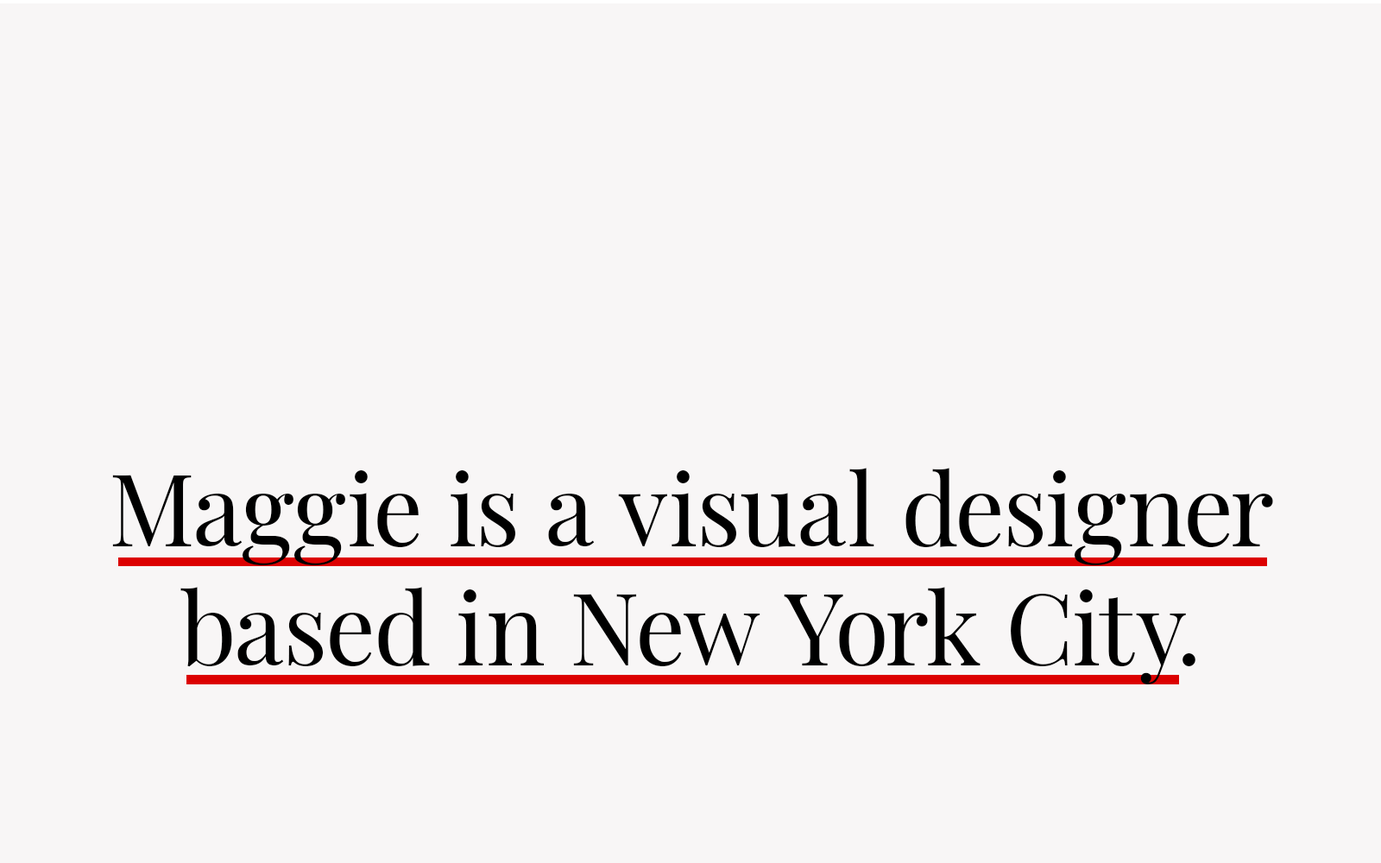
<style>
.page{position:relative;width:1381px;height:863px;background:#f8f6f6}
.page>*{position:absolute;margin:0}
.t1{font:99.3px "PlayfairDisplay-Regular";color:#000000}
</style>
<div class="page">
<p class="t1" style="left:112px;top:468px;width:1161px;height:217px;text-align:center">Maggie is a visual designer<br>based in New York City.</p>
</div>
